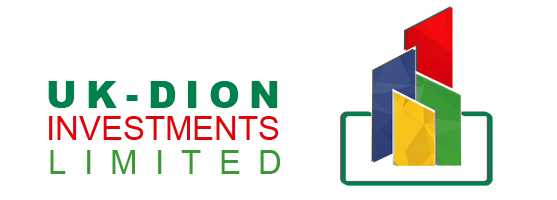
<style>
.page{position:relative;width:557px;height:200px;background:#ffffff}
.page>*{position:absolute;margin:0}
.t1{font:37.3px "Arial-Black";letter-spacing:0.24em;color:#00804b}
.t2{font:33px "ArialMT";color:#e0030c}
.t3{font:33px "ArialMT";letter-spacing:0.52em;color:#3b9935}
</style>
<div class="page">
<p class="t1" style="left:48px;top:81px;width:230px;height:27px">UK-DION</p>
<p class="t2" style="left:49px;top:116px;width:230px;height:24px">INVESTMENTS</p>
<p class="t3" style="left:50px;top:150px;width:231px;height:24px">LIMITED</p>
</div>
